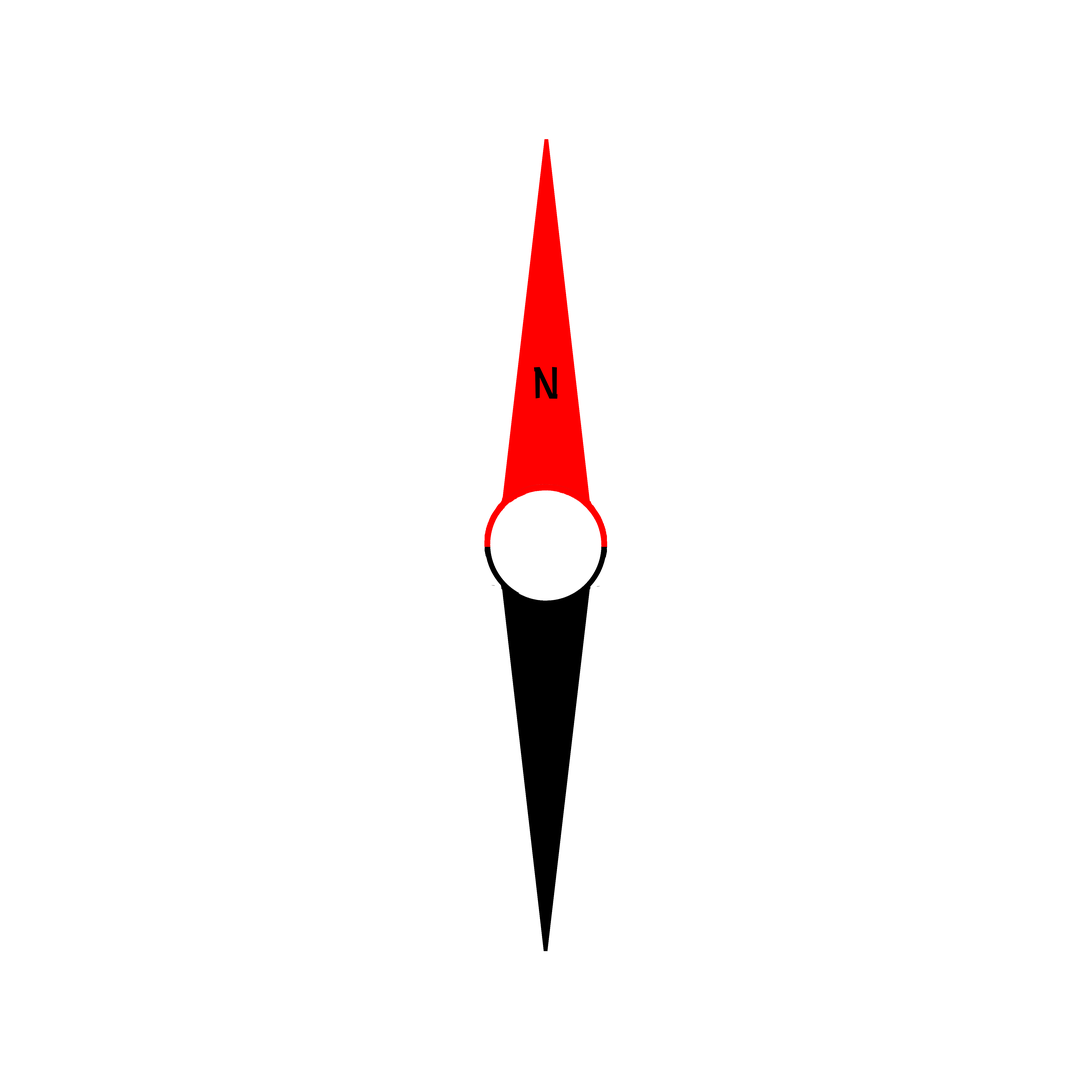
<style>
.page{position:relative;width:1092px;height:1092px;background:#ffffff}
.page>*{position:absolute;margin:0}
.t1{font:43.2px "shetumodengxiaofangti";color:#000000}
</style>
<div class="page">
<p class="t1" style="left:534px;top:367px;width:24px;height:32px">N</p>
</div>
